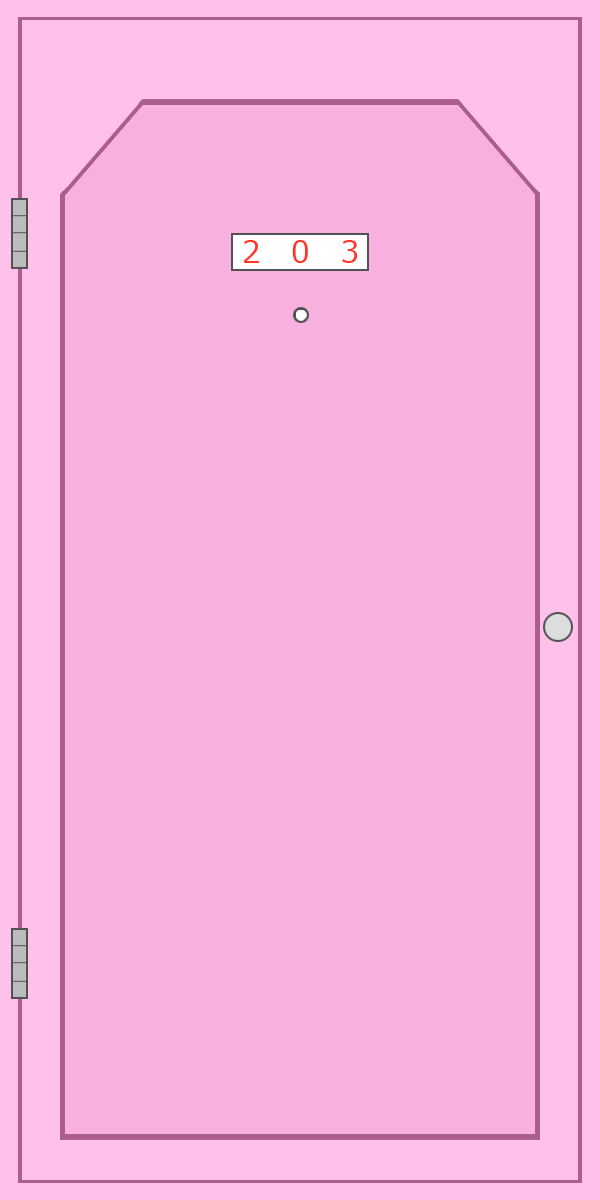
<style>
.page{position:relative;width:600px;height:1200px;background:#f8b0df}
.page>*{position:absolute;margin:0}
.t1{font:30px "Meiryo";color:#ff362a}
</style>
<div class="page">
<p class="t1" style="left:244px;top:240px;width:114px;height:23px">2   0   3</p>
</div>
